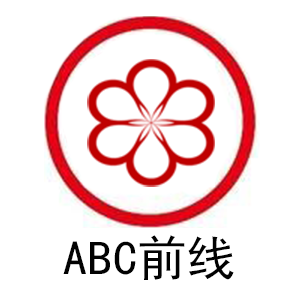
<style>
.page{position:relative;width:300px;height:300px;background:#ffffff}
.page>*{position:absolute;margin:0}
.t1{font:48px "SimHei";letter-spacing:0.025em;color:#020202}
</style>
<div class="page">
<p class="t1" style="left:63px;top:235px;width:171px;height:45px">ABC前线</p>
</div>
